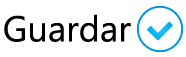
<style>
.page{position:relative;width:186px;height:57px;background:#ffffff}
.page>*{position:absolute;margin:0}
.t1{font:36px "SegoeUI";color:#010000}
</style>
<div class="page">
<p class="t1" style="left:4px;top:14px;width:127px;height:28px">Guardar</p>
</div>
